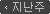
<style>
.page{position:relative;width:50px;height:14px;background:#404040}
.page>*{position:absolute;margin:0}
.t1{font:11px "Dotum";color:#bababa}
</style>
<div class="page">
<p class="t1" style="left:13px;top:2px;width:31px;height:10px">지난주</p>
</div>
